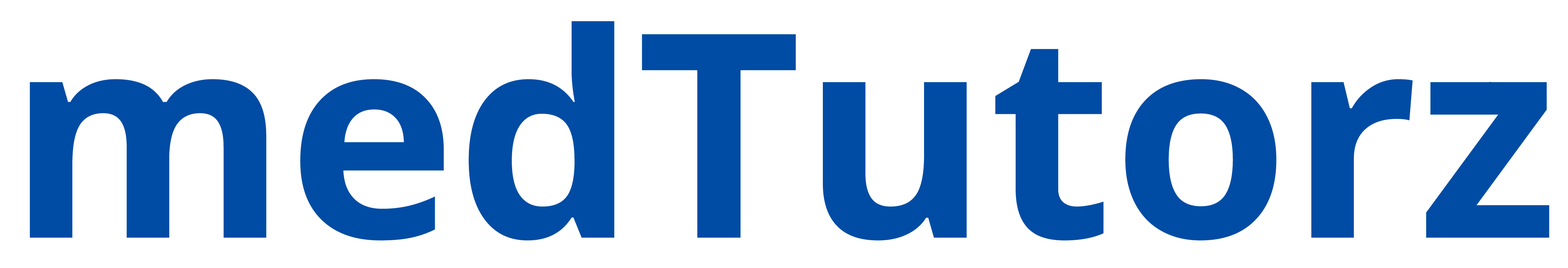
<style>
.page{position:relative;width:1568px;height:268px;background:#ffffff}
.page>*{position:absolute;margin:0}
.t1{font:285.1px "OpenSans-Bold";color:#004ca4}
</style>
<div class="page">
<p class="t1" style="left:30px;top:21px;width:1519px;height:220px">medTutorz</p>
</div>
